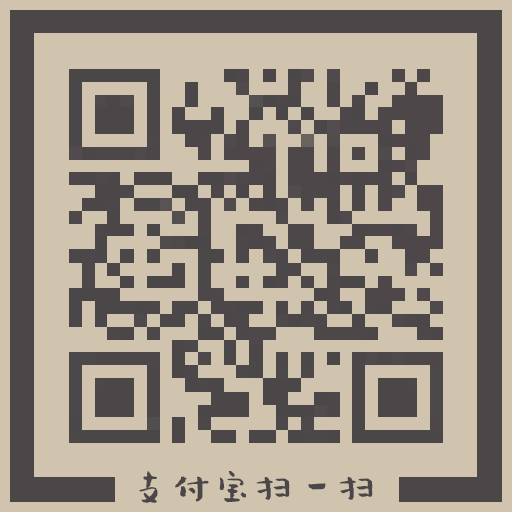
<style>
.page{position:relative;width:512px;height:512px;background:#d1c4af}
.page>*{position:absolute;margin:0}
.t1{font:41.7px "XiQuexiaoqingsong-regular";color:#4b4749}
</style>
<div class="page">
<p class="t1" style="left:139px;top:471px;width:234px;height:32px">支付宝扫一扫</p>
</div>
